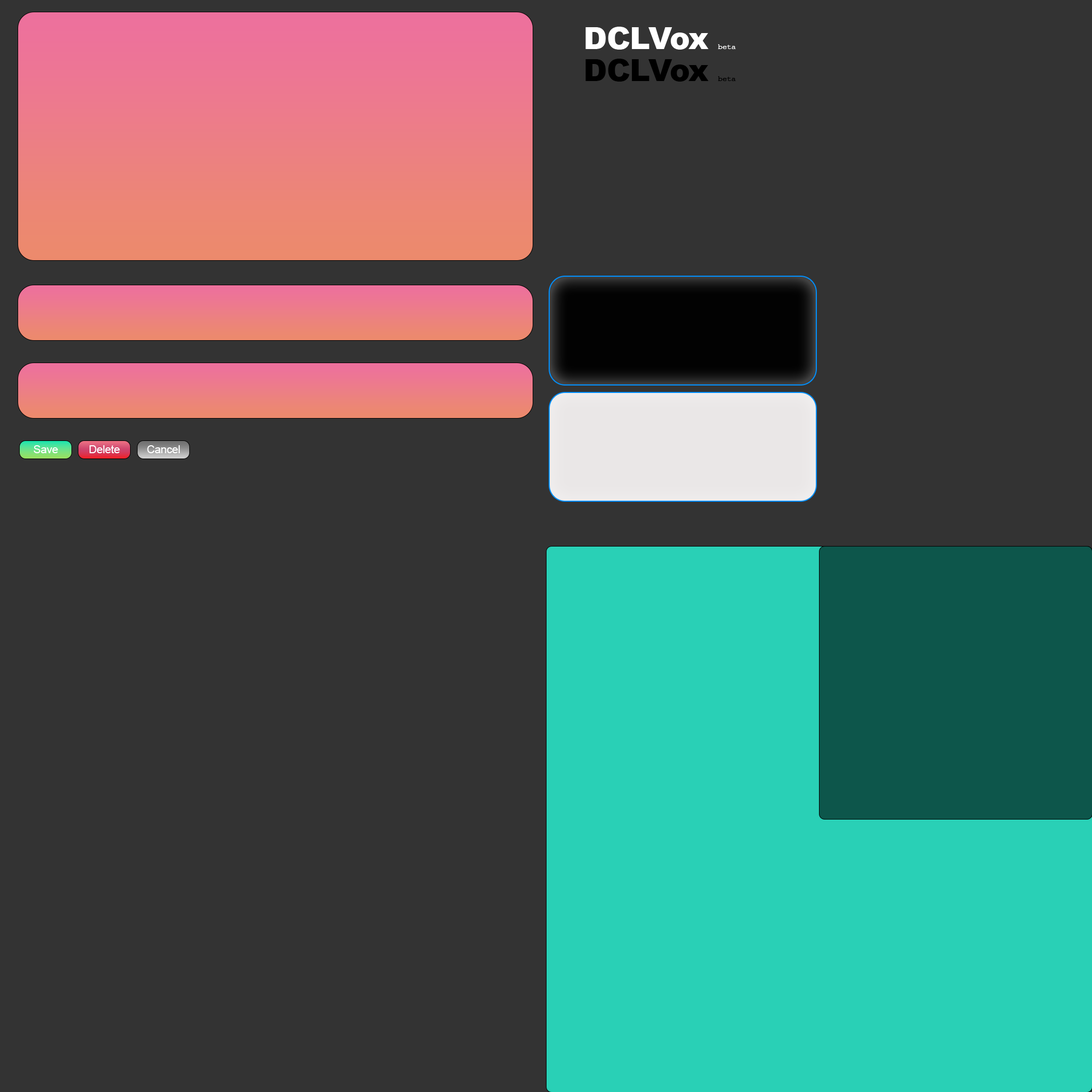
<style>
.page{position:relative;width:1092px;height:1092px;background:#333333}
.page>*{position:absolute;margin:0}
.t1{font:30.6px "Arial-Black";letter-spacing:-0.02em;color:#ffffff}
.t2{font:7.7px "Courier";letter-spacing:-0.02em;color:#ffffff}
.t3{font:30.6px "Arial-Black";letter-spacing:-0.02em;color:#000000}
.t4{font:7.7px "Courier";letter-spacing:-0.02em;color:#000000}
.t5{font:11.2px "ArialMT";letter-spacing:-0.02em;color:#ffffff}
</style>
<div class="page">
<p class="t1" style="left:585px;top:27px;width:151px;height:23px">DCLVox <span class="t2">beta</span></p>
<p class="t3" style="left:585px;top:59px;width:151px;height:23px">DCLVox <span class="t4">beta</span></p>
<p class="t5" style="left:34px;top:445px;width:24px;height:8px">Save</p>
<p class="t5" style="left:90px;top:445px;width:30px;height:8px">Delete</p>
<p class="t5" style="left:147px;top:445px;width:33px;height:8px">Cancel</p>
</div>
